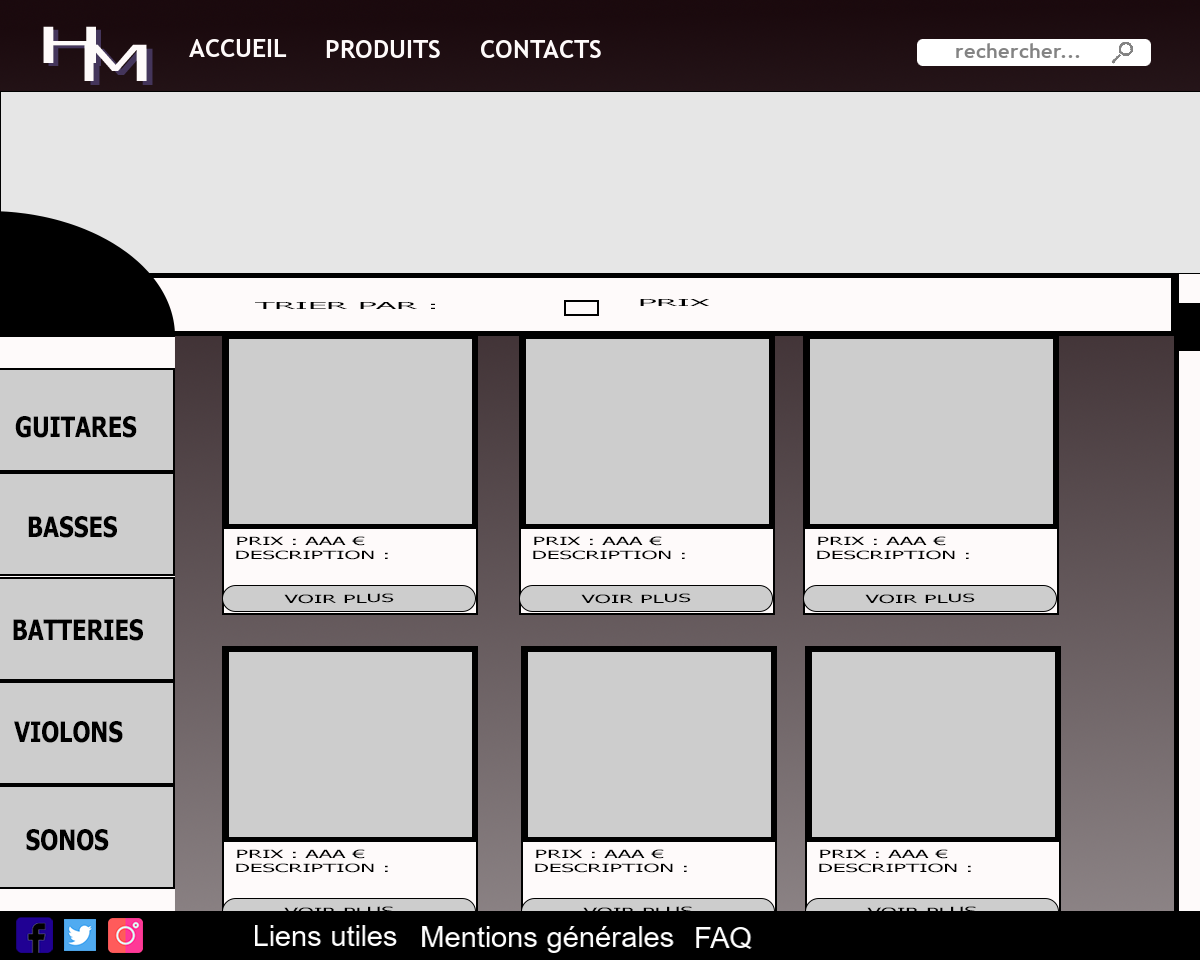
<style>
.page{position:relative;width:1200px;height:960px;background:#cdcdcd}
.page>*{position:absolute;margin:0}
.t1{font:50px "Tahoma";color:#fefafa;text-transform:uppercase;scale:2 1}
.t2{font:50px "Tahoma";text-transform:uppercase;scale:2 1}
.t3{font:9.8px "Tahoma";color:#000000;text-transform:uppercase;scale:3.43 1}
.t4{font:28.3px "Tahoma-Bold";color:#000000;text-transform:uppercase;scale:0.82 1}
.t5{font:11.2px "Tahoma";color:#000000;text-transform:uppercase;scale:2 1}
</style>
<div class="page">
<p class="t1" style="left:43px;top:26px;width:53px;height:37px">H</p>
<p class="t2" style="left:48px;top:29px;width:53px;height:37px">H</p>
<p class="t1" style="left:84px;top:44px;width:63px;height:37px">m</p>
<p class="t2" style="left:90px;top:48px;width:63px;height:37px">M</p>
<p class="t3" style="left:255px;top:302px;width:180px;height:7px">Trier par :</p>
<p class="t3" style="left:640px;top:299px;width:69px;height:7px">prix</p>
<p class="t4" style="left:15px;top:416px;width:122px;height:22px">Guitares</p>
<p class="t4" style="left:28px;top:516px;width:89px;height:22px">Basses</p>
<p class="t5" style="left:237px;top:536px;width:128px;height:10px">prix : aaa €</p>
<p class="t5" style="left:534px;top:536px;width:128px;height:10px">prix : aaa €</p>
<p class="t5" style="left:818px;top:536px;width:128px;height:10px">prix : aaa €</p>
<p class="t5" style="left:236px;top:550px;width:152px;height:10px">dESCRIPTION :</p>
<p class="t5" style="left:533px;top:550px;width:152px;height:10px">dESCRIPTION :</p>
<p class="t5" style="left:817px;top:550px;width:152px;height:10px">dESCRIPTION :</p>
<p class="t5" style="left:284px;top:593px;width:110px;height:11px;rotate:-1deg">Voir plus</p>
<p class="t5" style="left:581px;top:593px;width:110px;height:11px;rotate:-1deg">Voir plus</p>
<p class="t5" style="left:865px;top:593px;width:110px;height:11px;rotate:-1deg">Voir plus</p>
<p class="t4" style="left:13px;top:619px;width:130px;height:22px">Batteries</p>
<p class="t4" style="left:14px;top:721px;width:109px;height:22px">Violons</p>
<p class="t4" style="left:26px;top:829px;width:83px;height:22px">Sonos</p>
<p class="t5" style="left:237px;top:849px;width:128px;height:10px">prix : aaa €</p>
<p class="t5" style="left:536px;top:849px;width:128px;height:10px">prix : aaa €</p>
<p class="t5" style="left:820px;top:849px;width:128px;height:10px">prix : aaa €</p>
<p class="t5" style="left:236px;top:863px;width:152px;height:10px">dESCRIPTION :</p>
<p class="t5" style="left:535px;top:863px;width:152px;height:10px">dESCRIPTION :</p>
<p class="t5" style="left:819px;top:863px;width:152px;height:10px">dESCRIPTION :</p>
</div>
